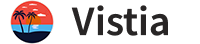
<style>
.page{position:relative;width:200px;height:44px;background:#ffffff}
.page>*{position:absolute;margin:0}
.t1{font:41.7px "SourceSansRoman-Semibold";color:#282525}
</style>
<div class="page">
<p class="t1" style="left:71px;top:5px;width:97px;height:31px">Vistia</p>
</div>
